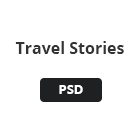
<style>
.page{position:relative;width:140px;height:140px;background:#ffffff}
.page>*{position:absolute;margin:0}
.t1{font:16px "OpenSans-Bold";color:#333333}
.t2{font:13px "OpenSans-Bold";color:#ffffff}
</style>
<div class="page">
<p class="t1" style="left:15px;top:41px;width:109px;height:13px">Travel Stories</p>
<p class="t2" style="left:59px;top:85px;width:24px;height:9px">PSD</p>
</div>
